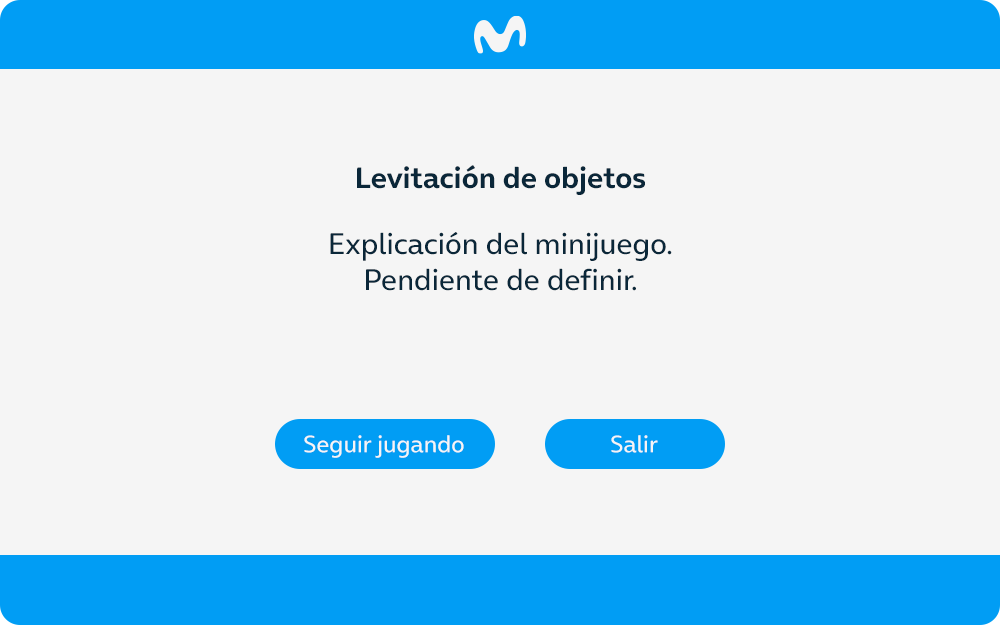
<style>
.page{position:relative;width:1000px;height:625px;background:#f5f5f5}
.page>*{position:absolute;margin:0}
.t1{font:30px "OnAir-Bold";color:#0a2739}
.t2{font:30px "OnAir-Regular";color:#0a2739}
.t3{font:24px "OnAir-Regular";color:#f5f5f5}
</style>
<div class="page">
<p class="t1" style="left:357px;top:165px;width:288px;height:30px">Levitación de objetos</p>
<p class="t2" style="left:330px;top:232px;width:342px;height:59px;text-align:center">Explicación del minijuego.<br>Pendiente de definir.</p>
<p class="t3" style="left:304px;top:435px;width:160px;height:23px">Seguir jugando</p>
<p class="t3" style="left:611px;top:435px;width:47px;height:18px">Salir</p>
</div>
